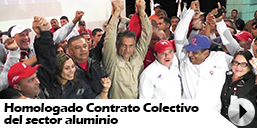
<style>
.page{position:relative;width:257px;height:128px;background:#ffffff}
.page>*{position:absolute;margin:0}
.t1{font:12.5px "ErasITC-Bold";letter-spacing:-0.025em;color:#000000}
</style>
<div class="page">
<p class="t1" style="left:4px;top:103px;width:195px;height:12px">Homologado Contrato Colectivo</p>
<p class="t1" style="left:4px;top:115px;width:114px;height:9px">del sector aluminio</p>
</div>
